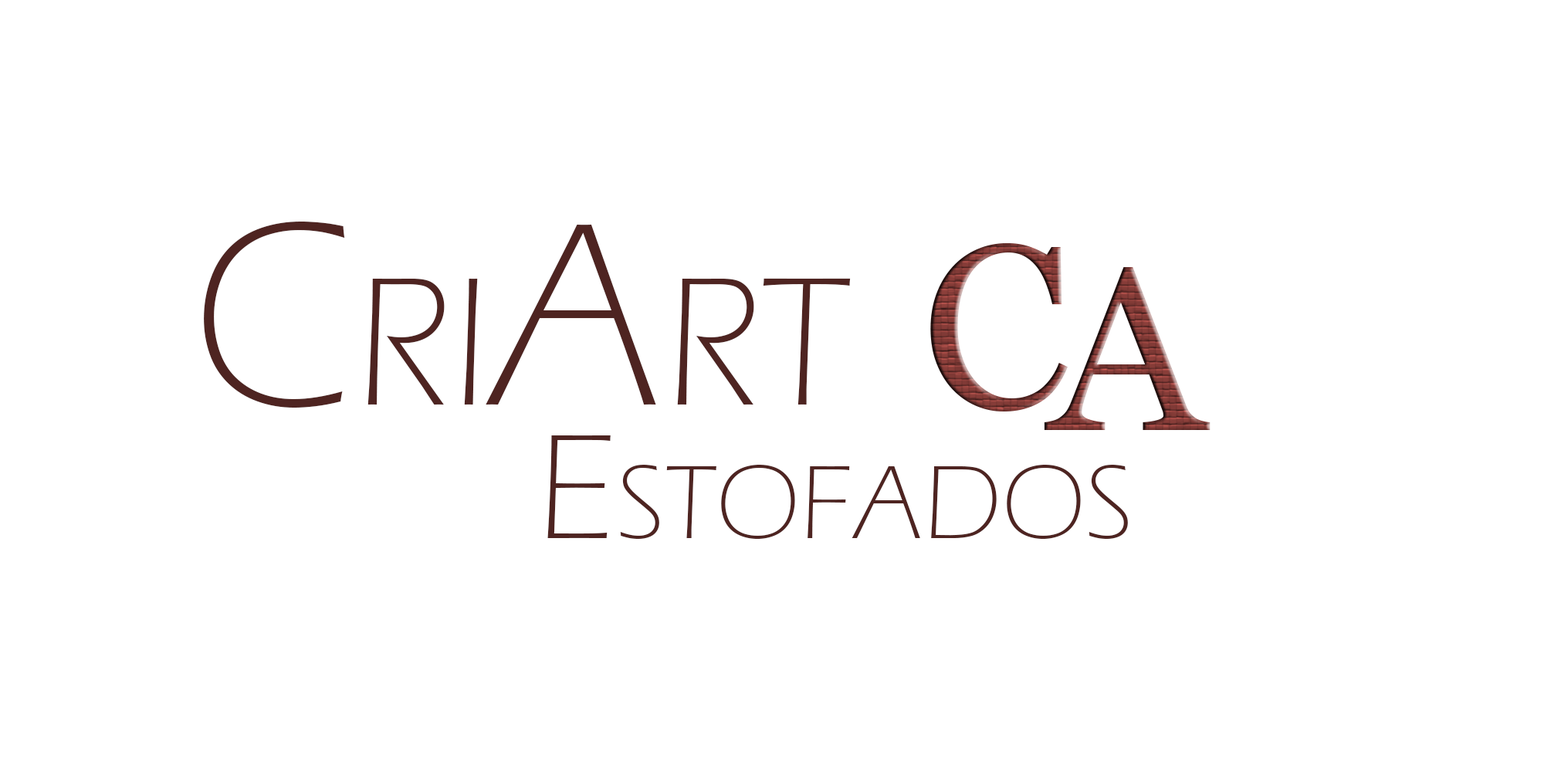
<style>
.page{position:relative;width:1544px;height:772px;background:#ffffff}
.page>*{position:absolute;margin:0}
.t1{font:270.3px "ErasITC-Light";color:#4e2421;font-variant:small-caps}
.t2{font:154.4px "ErasITC-Light";color:#4e2421;font-variant:small-caps}
</style>
<div class="page">
<p class="t1" style="left:204px;top:222px;width:647px;height:186px">CriArt</p>
<p class="t2" style="left:547px;top:435px;width:581px;height:104px">Estofados</p>
</div>
